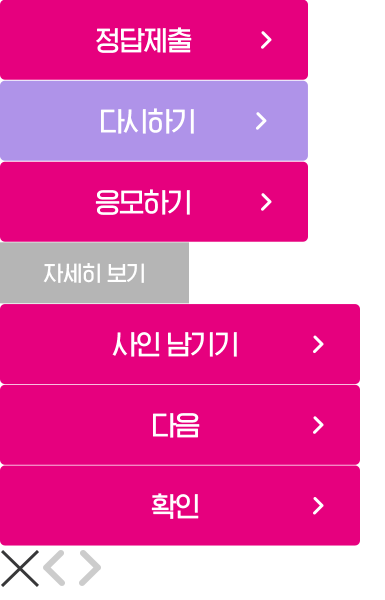
<style>
.page{position:relative;width:385px;height:600px;background:#e6007e}
.page>*{position:absolute;margin:0}
.t1{font:28px "HGGGothicssiP60g";letter-spacing:-0.04em;color:#ffffff}
.t2{font:22px "HGGGothicssiP60g";letter-spacing:-0.01em;color:#ffffff;text-transform:uppercase}
</style>
<div class="page">
<p class="t1" style="left:96px;top:27px;width:96px;height:26px">정답제출</p>
<p class="t1" style="left:101px;top:108px;width:93px;height:26px">다시하기</p>
<p class="t1" style="left:95px;top:189px;width:95px;height:26px">응모하기</p>
<p class="t2" style="left:43px;top:263px;width:101px;height:20px">자세히 보기</p>
<p class="t1" style="left:112px;top:332px;width:125px;height:25px">사인 남기기</p>
<p class="t1" style="left:153px;top:413px;width:47px;height:25px">다음</p>
<p class="t1" style="left:151px;top:493px;width:48px;height:26px">확인</p>
</div>
